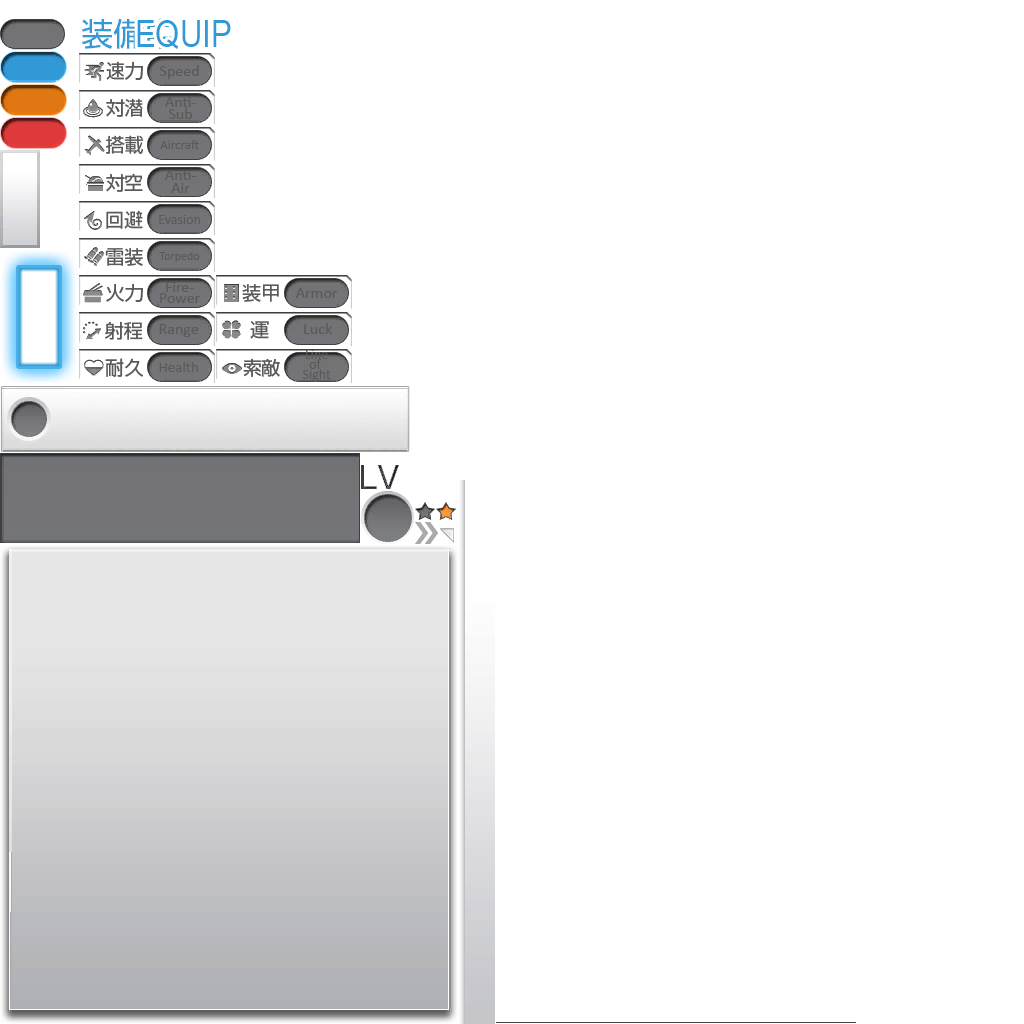
<style>
.page{position:relative;width:1024px;height:1024px;background:#ffffff}
.page>*{position:absolute;margin:0}
.t1{font:38px "ArialNarrow";color:#319ad6}
.t2{font:16px "Calibri";color:#5a5a5a}
.t3{font:16px/12px "Calibri";color:#5a5a5a}
.t4{font:13px "Calibri";color:#5a5a5a}
.t5{font:16px/13px "Calibri";color:#5a5a5a}
.t6{font:14px "Calibri";color:#5a5a5a}
.t7{font:12px "Calibri";color:#5a5a5a}
.t8{font:16px/11px "Calibri";color:#5a5a5a}
.t9{font:15px "Calibri";color:#5a5a5a}
</style>
<div class="page">
<p class="t1" style="left:137px;top:20px;width:94px;height:29px">EQUIP</p>
<p class="t2" style="left:159px;top:65px;width:40px;height:14px">Speed</p>
<p class="t3" style="left:165px;top:97px;width:31px;height:22px;text-align:center">Anti-<br>Sub</p>
<p class="t4" style="left:160px;top:140px;width:39px;height:9px">Aircraft</p>
<p class="t5" style="left:165px;top:170px;width:31px;height:23px;text-align:center">Anti-<br>Air</p>
<p class="t6" style="left:159px;top:215px;width:41px;height:9px">Evasion</p>
<p class="t7" style="left:159px;top:252px;width:41px;height:10px">Torpedo</p>
<p class="t8" style="left:160px;top:282px;width:40px;height:21px;text-align:center">Fire-<br>Power</p>
<p class="t2" style="left:295px;top:288px;width:43px;height:10px">Armor</p>
<p class="t2" style="left:159px;top:324px;width:40px;height:13px">Range</p>
<p class="t2" style="left:304px;top:323px;width:29px;height:11px">Luck</p>
<p class="t9" style="left:159px;top:362px;width:39px;height:10px">Health</p>
</div>
